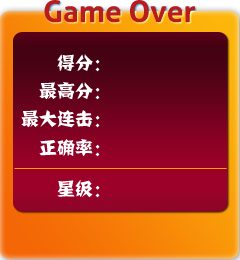
<style>
.page{position:relative;width:240px;height:260px}
.page>*{position:absolute;margin:0}
.t1{font:30px "Aller-Bold";color:#b71d1d}
.t2{font:18px "JJianzi";color:#ffffff}
</style>
<div class="page">
<p class="t1" style="left:44px;top:0px;width:151px;height:23px">Game Over</p>
<p class="t2" style="left:57px;top:54px;width:43px;height:18px">得分：</p>
<p class="t2" style="left:39px;top:82px;width:61px;height:18px">最高分：</p>
<p class="t2" style="left:21px;top:110px;width:79px;height:18px">最大连击：</p>
<p class="t2" style="left:39px;top:139px;width:61px;height:18px">正确率：</p>
<p class="t2" style="left:57px;top:180px;width:43px;height:18px">星级：</p>
</div>
